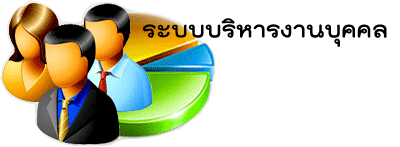
<style>
.page{position:relative;width:400px;height:147px;background:#ffffff}
.page>*{position:absolute;margin:0}
.t1{font:31.5px "THKodchasal-Bold";color:#000000}
</style>
<div class="page">
<p class="t1" style="left:143px;top:18px;width:244px;height:29px">ระบบบริหารงานบุคคล</p>
</div>
